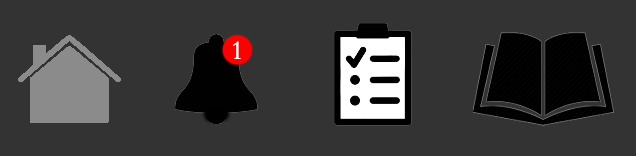
<style>
.page{position:relative;width:636px;height:156px;background:#333333}
.page>*{position:absolute;margin:0}
.t1{font:24px "Lora-Regular";color:#ffffff}
</style>
<div class="page">
<p class="t1" style="left:233px;top:41px;width:8px;height:18px">1</p>
</div>
